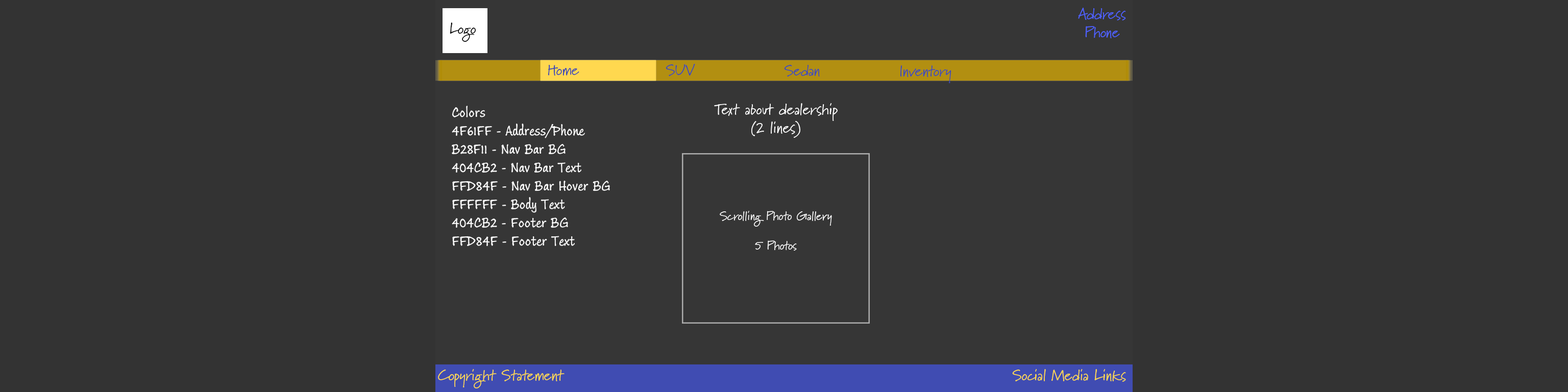
<style>
.page{position:relative;width:1568px;height:392px;background:#333333}
.page>*{position:absolute;margin:0}
.t1{font:15.3px "Marydale-Regular";color:#4f61ff}
.t2{font:15.3px "Marydale-Regular";color:#000000}
.t3{font:15.3px "Marydale-Regular";color:#404cb2}
.t4{font:15.3px "InkJournal";color:#ffffff}
.t5{font:15.3px "Marydale-Regular";color:#ffffff}
.t6{font:12.2px "Marydale-Regular";color:#ffffff}
.t7{font:15.3px "Marydale-Regular";color:#ffd84f}
</style>
<div class="page">
<p class="t1" style="left:1078px;top:8px;width:48px;height:30px;text-align:center">Address<br>Phone</p>
<p class="t2" style="left:450px;top:22px;width:26px;height:20px">Logo</p>
<p class="t3" style="left:548px;top:65px;width:31px;height:11px">Home</p>
<p class="t3" style="left:666px;top:64px;width:29px;height:12px">SUV</p>
<p class="t3" style="left:784px;top:65px;width:36px;height:12px">Sedan</p>
<p class="t3" style="left:900px;top:65px;width:51px;height:18px">Inventory</p>
<p class="t4" style="left:452px;top:106px;width:158px;height:140px">Colors<br>4F61FF - Address/Phone<br>B28F11 - Nav Bar BG<br>404CB2 - Nav Bar Text<br>FFD84F - Nav Bar Hover BG<br>FFFFFF - Body Text<br>404CB2 - Footer BG<br>FFD84F - Footer Text</p>
<p class="t5" style="left:714px;top:103px;width:124px;height:35px;text-align:center">Text about dealership<br>(2 lines)</p>
<p class="t6" style="left:720px;top:211px;width:112px;height:40px;text-align:center">Scrolling Photo Gallery<br><br>5 Photos</p>
<p class="t7" style="left:438px;top:369px;width:127px;height:19px">Copyright Statement</p>
<p class="t7" style="left:1012px;top:369px;width:114px;height:13px">Social Media Links</p>
</div>
